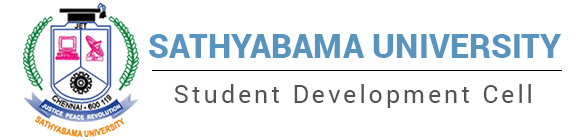
<style>
.page{position:relative;width:585px;height:140px;background:#ffffff}
.page>*{position:absolute;margin:0}
.t1{font:33.3px "Roboto-Black";color:#5794bf}
.t2{font:25px "Roboto-Regular";letter-spacing:0.12em;color:#535353}
</style>
<div class="page">
<p class="t1" style="left:149px;top:34px;width:413px;height:24px">SATHYABAMA UNIVERSITY</p>
<p class="t2" style="left:174px;top:84px;width:357px;height:24px">Student Development Cell</p>
</div>
